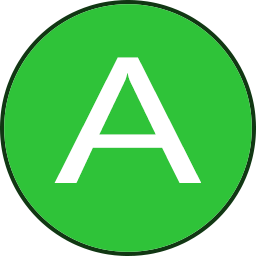
<style>
.page{position:relative;width:256px;height:256px;background:#2fc339}
.page>*{position:absolute;margin:0}
.t1{font:42.9px "Leelawadee";color:#ffffff;scale:1.31 1}
</style>
<div class="page">
<p class="t1" style="left:54px;top:57px;width:147px;height:126px;text-align:center">A</p>
</div>
